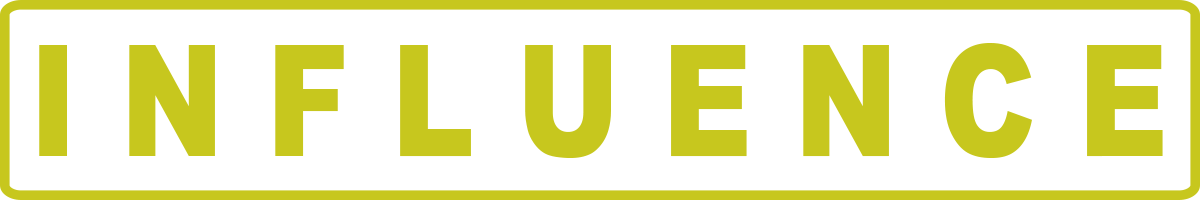
<style>
.page{position:relative;width:1200px;height:200px;background:#ffffff}
.page>*{position:absolute;margin:0}
.t1{font:155.3px "Arial-Black";color:#c7c71e;scale:0.8 1}
</style>
<div class="page">
<p class="t1" style="left:39px;top:43px;width:1124px;height:115px">I N F L U E N C E</p>
</div>
